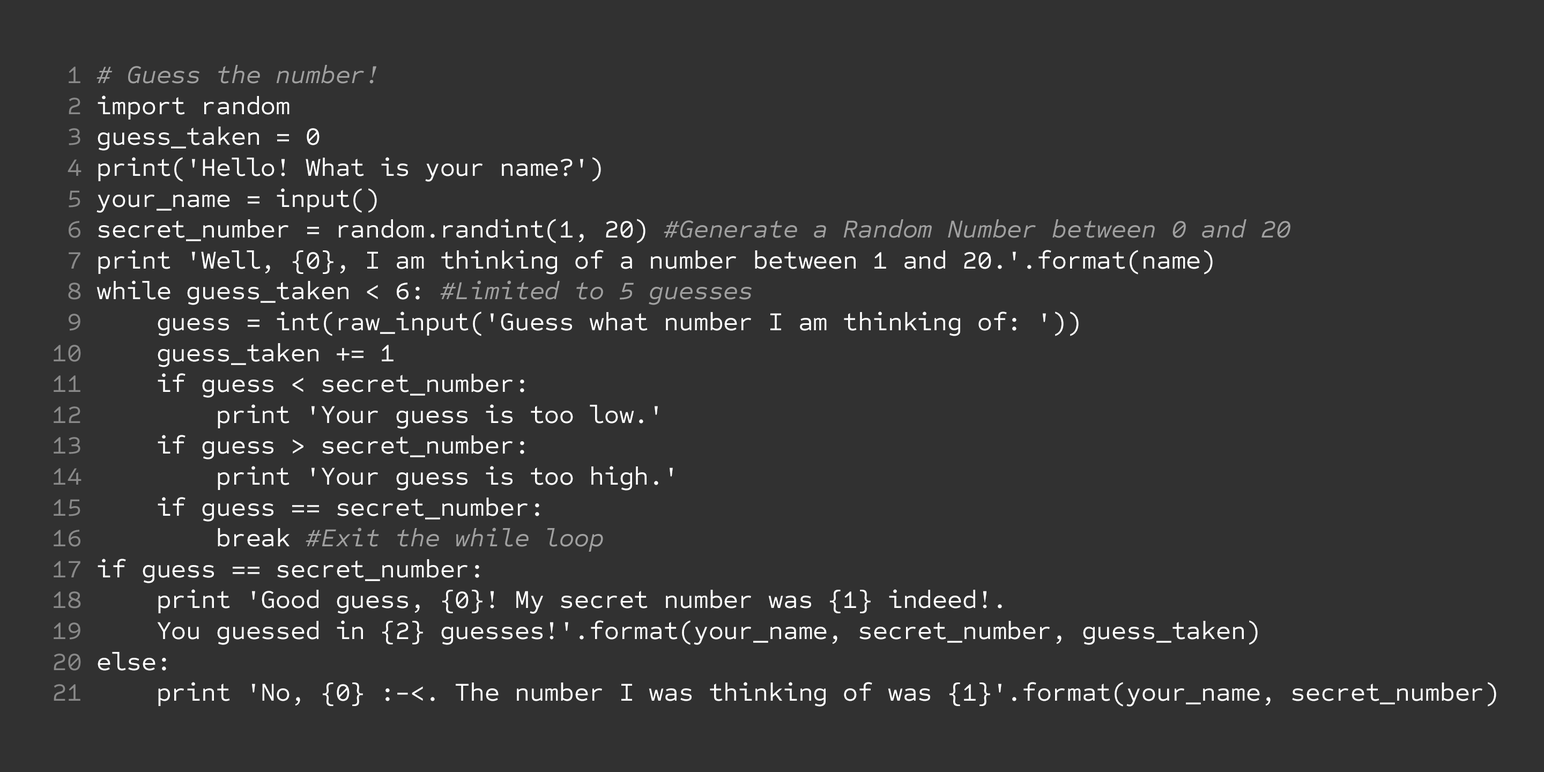
<style>
.page{position:relative;width:1544px;height:772px;background:#313131}
.page>*{position:absolute;margin:0}
.t1{font:25.7px "SometypeMono-Regular";color:#ffffff}
.t2{font:25.7px "SometypeMono-Regular";color:#898989}
.t3{font:25.7px "SometypeMono-RegularItalic";color:#a0a0a0}
</style>
<div class="page">
<p class="t1" style="left:54px;top:65px;width:1443px;height:642px"><span class="t2"> 1 </span><span class="t3"># Guess the number!<br></span><span class="t2"> 2</span> import random<br><span class="t2"> 3</span> guess_taken = 0<br><span class="t2"> 4</span> print('Hello! What is your name?')<br><span class="t2"> 5</span> your_name = input()<br><span class="t2"> 6</span> secret_number = random.randint(1, 20) <span class="t3">#Generate a Random Number between 0 and 20<br></span><span class="t2"> 7</span> print 'Well, {0}, I am thinking of a number between 1 and 20.'.format(name)<br><span class="t2"> 8</span> while guess_taken &lt; 6: <span class="t3">#Limited to 5 guesses<br></span><span class="t2"> 9</span>     guess = int(raw_input('Guess what number I am thinking of: '))<br><span class="t2">10</span>     guess_taken += 1 <br><span class="t2">11</span>     if guess &lt; secret_number:<br><span class="t2">12</span>         print 'Your guess is too low.'<br><span class="t2">13</span>     if guess &gt; secret_number:<br><span class="t2">14</span>         print 'Your guess is too high.'<br><span class="t2">15</span>     if guess == secret_number:<br><span class="t2">16</span>         break <span class="t3">#Exit the while loop<br></span><span class="t2">17</span> if guess == secret_number:<br><span class="t2">18</span>     print 'Good guess, {0}! My secret number was {1} indeed!. <br><span class="t2">19</span>     You guessed in {2} guesses!'.format(your_name, secret_number, guess_taken)<br><span class="t2">20</span> else:<br><span class="t2">21</span>     print 'No, {0} :-&lt;. The number I was thinking of was {1}'.format(your_name, secret_number)</p>
</div>
